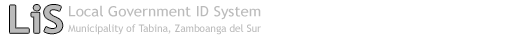
<style>
.page{position:relative;width:528px;height:38px;background:#ffffff}
.page>*{position:absolute;margin:0}
.t1{font:14.3px "TrebuchetMS";color:#bbbbbb;scale:1.06 1}
.t2{font:10.5px "TrebuchetMS";color:#bbbbbb;scale:0.96 1}
</style>
<div class="page">
<p class="t1" style="left:69px;top:5px;width:192px;height:15px">Local Government ID System</p>
<p class="t2" style="left:68px;top:24px;width:193px;height:11px">Municipality of Tabina, Zamboanga del Sur</p>
</div>
